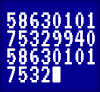
<style>
.page{position:relative;width:100px;height:92px;background:#030092}
.page>*{position:absolute;margin:0}
.t1{font:27px/18px "VT323-Regular";letter-spacing:0.005em;color:#ffffff}
</style>
<div class="page">
<p class="t1" style="left:7px;top:12px;width:88px;height:71px">58630101<br>75329940<br>58630101<br>7532</p>
</div>
